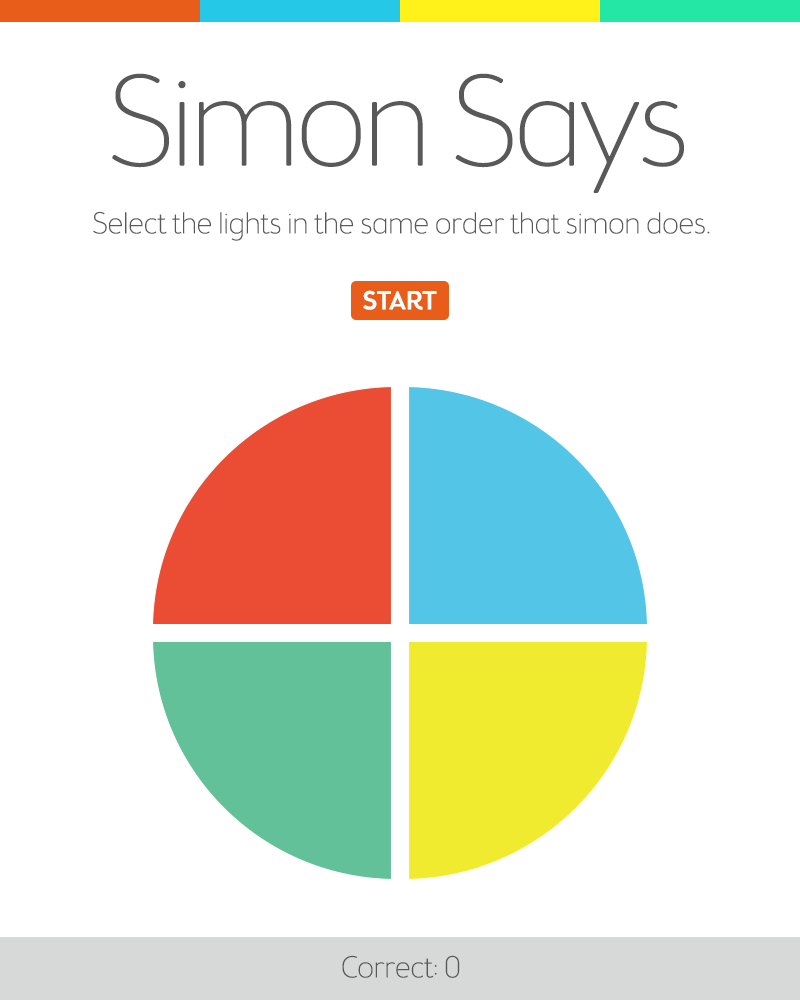
<style>
.page{position:relative;width:800px;height:1000px;background:#ffffff}
.page>*{position:absolute;margin:0}
.t1{font:128.6px "BrooklynSamuelsFive-Thin";letter-spacing:-0.025em;color:#595959}
.t2{font:30px "BrooklynSamuelsFive-Thin";color:#595959}
.t3{font:26px "BrooklynSamuelsFive-Medium";color:#ffffff;text-transform:uppercase}
</style>
<div class="page">
<p class="t1" style="left:112px;top:73px;width:572px;height:120px">Simon Says</p>
<p class="t2" style="left:93px;top:211px;width:617px;height:30px">Select the lights in the same order that simon does.</p>
<p class="t3" style="left:363px;top:290px;width:74px;height:20px">start</p>
<p class="t2" style="left:342px;top:955px;width:118px;height:23px">Correct: 0</p>
</div>
